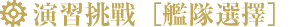
<style>
.page{position:relative;width:295px;height:27px;background:#ffffff}
.page>*{position:absolute;margin:0}
.t1{font:26px "RyuminPr6N-ExBold";color:#c2a856}
</style>
<div class="page">
<p class="t1" style="left:33px;top:1px;width:242px;height:26px">演習挑戰［艦隊選擇］</p>
</div>
